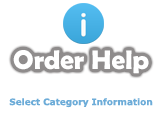
<style>
.page{position:relative;width:162px;height:115px;background:#ffffff}
.page>*{position:absolute;margin:0}
.t1{font:27px "BerlinSansFBDemi-Bold";color:#ffffff}
.t2{font:9px "Verdana-Bold";color:#6dacd8}
</style>
<div class="page">
<p class="t1" style="left:13px;top:50px;width:136px;height:24px">Order Help</p>
<p class="t2" style="left:9px;top:98px;width:144px;height:10px">Select Category Information</p>
</div>
